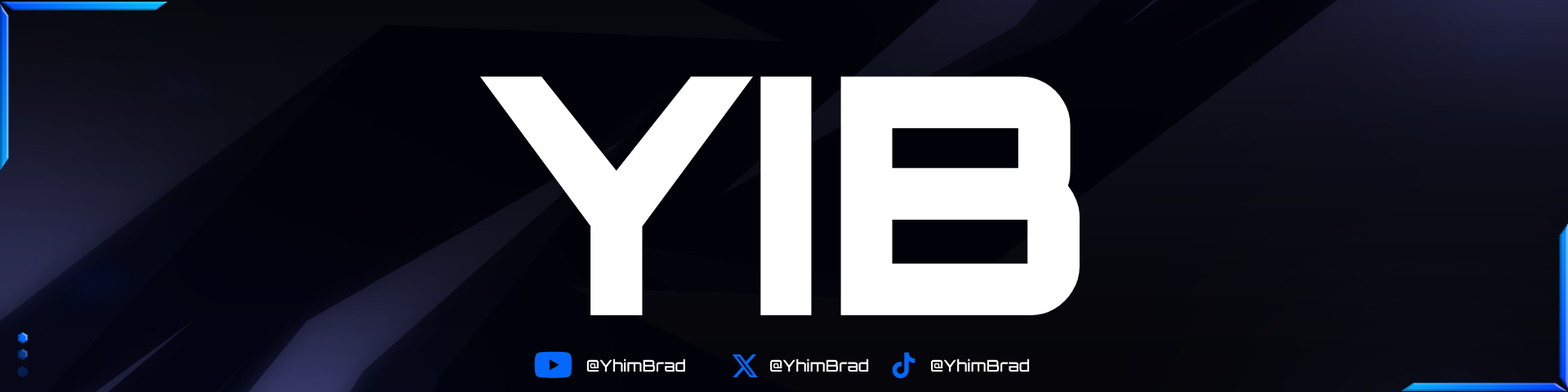
<style>
.page{position:relative;width:1568px;height:392px}
.page>*{position:absolute;margin:0}
.t1{font:331.6px "Orbitron-Black";color:#ffffff}
.t2{font:16.1px "Orbitron-Medium";color:#ffffff}
</style>
<div class="page">
<p class="t1" style="left:479px;top:76px;width:601px;height:239px">YIB</p>
<p class="t2" style="left:586px;top:359px;width:99px;height:13px">@YhimBrad</p>
<p class="t2" style="left:770px;top:359px;width:99px;height:13px">@YhimBrad</p>
<p class="t2" style="left:931px;top:359px;width:99px;height:13px">@YhimBrad</p>
</div>
